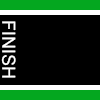
<style>
.page{position:relative;width:100px;height:100px;background:#000000}
.page>*{position:absolute;margin:0}
.t1{font:18px "ArialMT";color:#ffffff}
</style>
<div class="page">
<p class="t1" style="left:1px;top:21px;width:15px;height:57px;rotate:90deg">FINISH</p>
</div>
